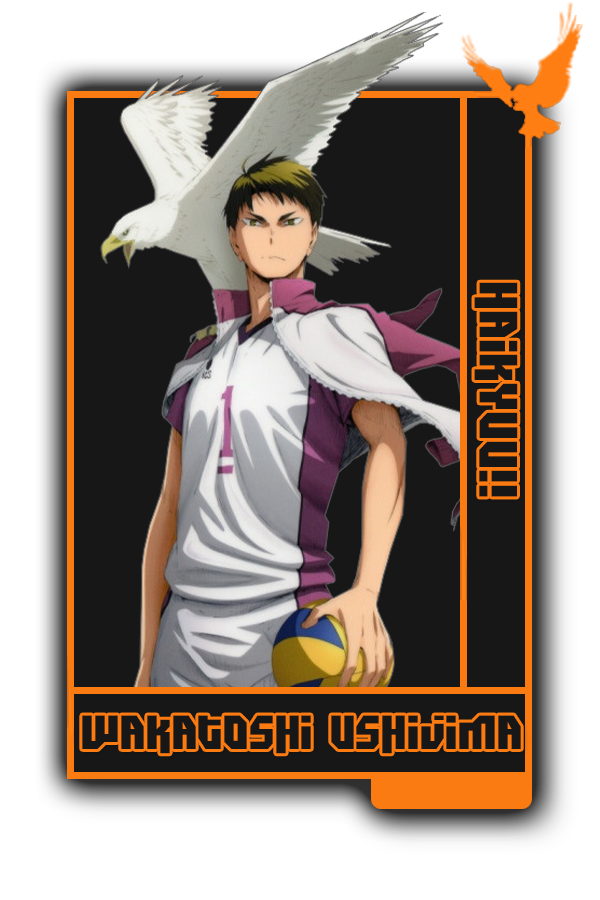
<style>
.page{position:relative;width:600px;height:900px;background:#171717}
.page>*{position:absolute;margin:0}
.t1{font:53.7px "Dimitri";color:#171717}
.t2{font:47.7px "Dimitri";color:#171717}
</style>
<div class="page">
<p class="t1" style="left:474px;top:282px;width:44px;height:215px;rotate:90deg">Haikyuu!!</p>
<p class="t2" style="left:82px;top:715px;width:439px;height:39px">Wakatoshi Ushijima</p>
</div>
